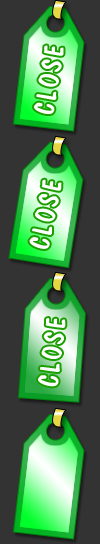
<style>
.page{position:relative;width:100px;height:544px;background:#333333}
.page>*{position:absolute;margin:0}
.t1{font:28.1px "DomCasualBT-Regular";letter-spacing:0.09em;color:#ffffff;font-variant:small-caps}
</style>
<div class="page">
<p class="t1" style="left:34px;top:45px;width:30px;height:69px;rotate:-80deg">CLOSE</p>
<p class="t1" style="left:29px;top:179px;width:33px;height:70px;rotate:-78deg">CLOSE</p>
<p class="t1" style="left:38px;top:318px;width:28px;height:69px;rotate:-83deg">CLOSE</p>
</div>
